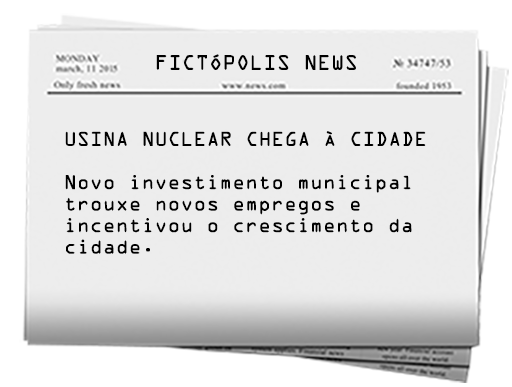
<style>
.page{position:relative;width:512px;height:387px;background:#ededed}
.page>*{position:absolute;margin:0}
.t1{font:18.8px "OCRAStd";color:#000000}
.t2{font:18px "OCRAStd";color:#000000}
</style>
<div class="page">
<p class="t1" style="left:156px;top:54px;width:200px;height:16px">FICTÓPOLIS NEWS</p>
<p class="t2" style="left:65px;top:131px;width:361px;height:123px">USINA NUCLEAR CHEGA À CIDADE<br><br>Novo investimento municipal<br>trouxe novos empregos e<br>incentivou o crescimento da<br>cidade.</p>
</div>
